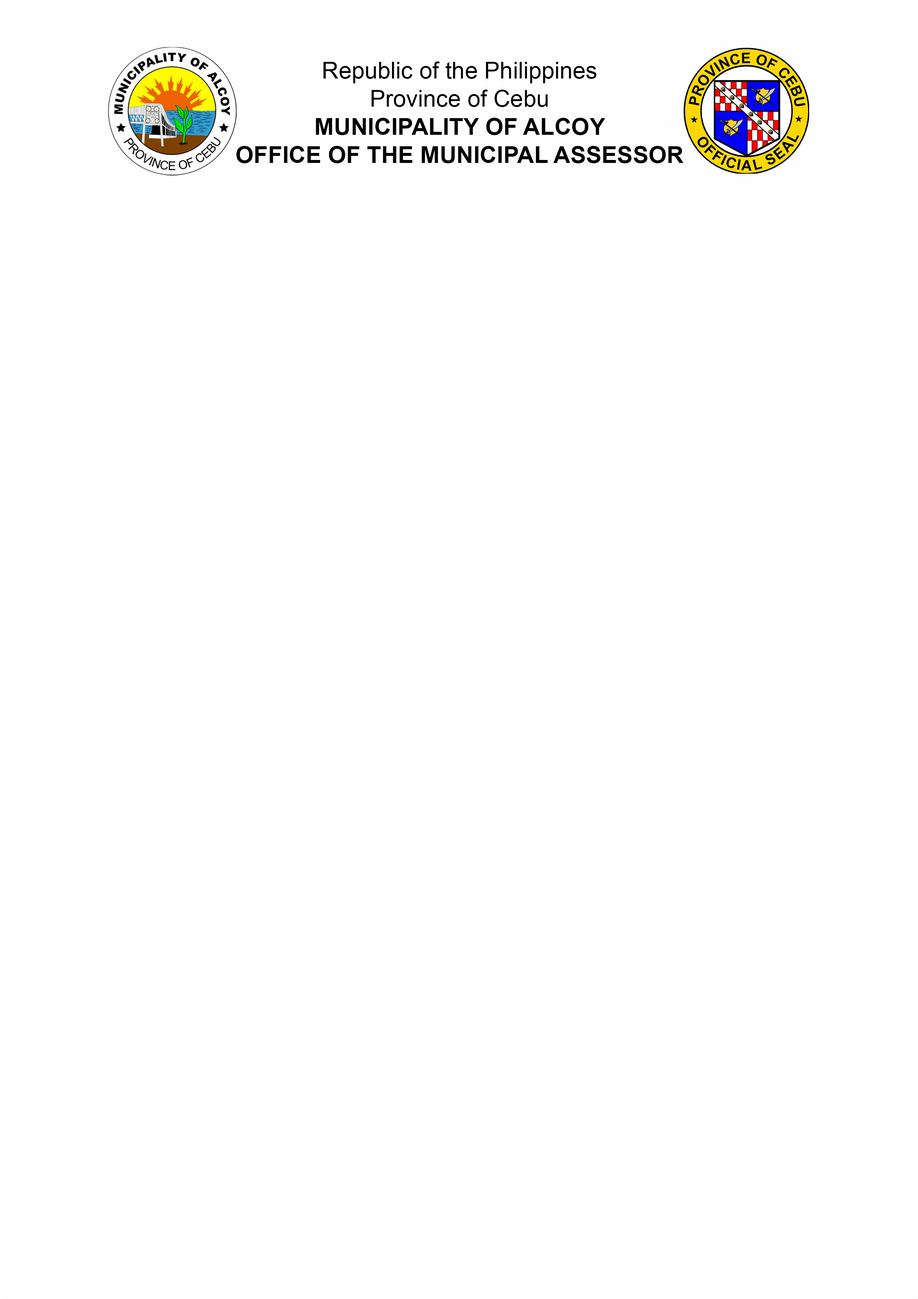
<style>
.page{position:relative;width:918px;height:1299px;background:#fefefe}
.page>*{position:absolute;margin:0}
.t1{font:23.4px "Arial-BoldMT";color:#000000}
.t2{font:23.4px "ArialMT";color:#000000}
</style>
<div class="page">
<p class="t1" style="left:236px;top:61px;width:447px;height:102px;text-align:center"><span class="t2">Republic of the Philippines<br>Province of Cebu<br></span>MUNICIPALITY OF ALCOY<br>OFFICE OF THE MUNICIPAL ASSESSOR</p>
</div>
